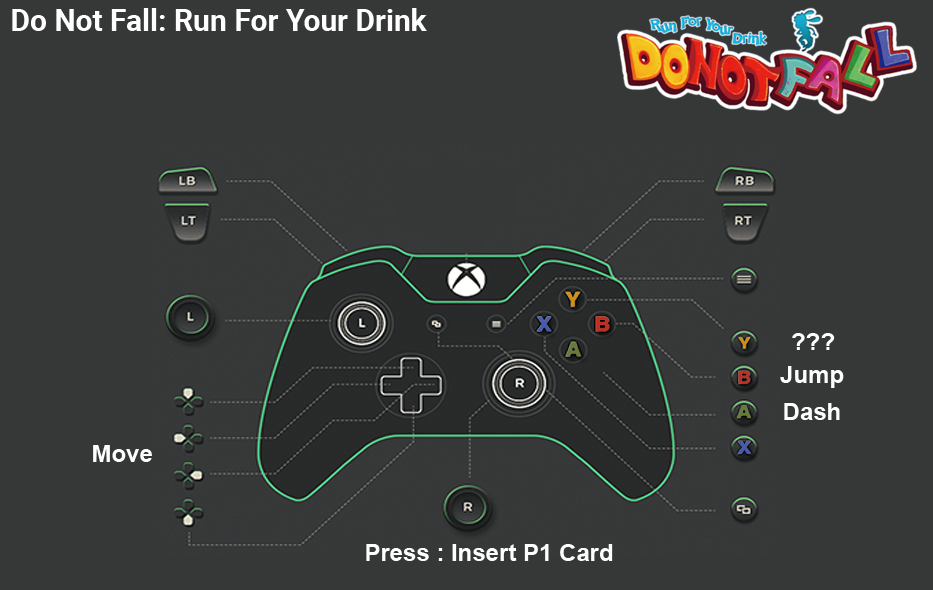
<style>
.page{position:relative;width:933px;height:590px;background:#363838}
.page>*{position:absolute;margin:0}
.t1{font:30px "Roboto-Bold";color:#ffffff}
.t2{font:24px "Arial-BoldMT";color:#fefefe}
</style>
<div class="page">
<p class="t1" style="left:12px;top:8px;width:415px;height:23px">Do Not Fall: Run For Your Drink</p>
<p class="t2" style="left:792px;top:333px;width:43px;height:17px">???</p>
<p class="t2" style="left:780px;top:366px;width:64px;height:22px">Jump</p>
<p class="t2" style="left:784px;top:403px;width:56px;height:17px">Dash</p>
<p class="t2" style="left:93px;top:445px;width:59px;height:17px">Move</p>
<p class="t2" style="left:366px;top:544px;width:247px;height:17px">Press : Insert P1 Card</p>
</div>
